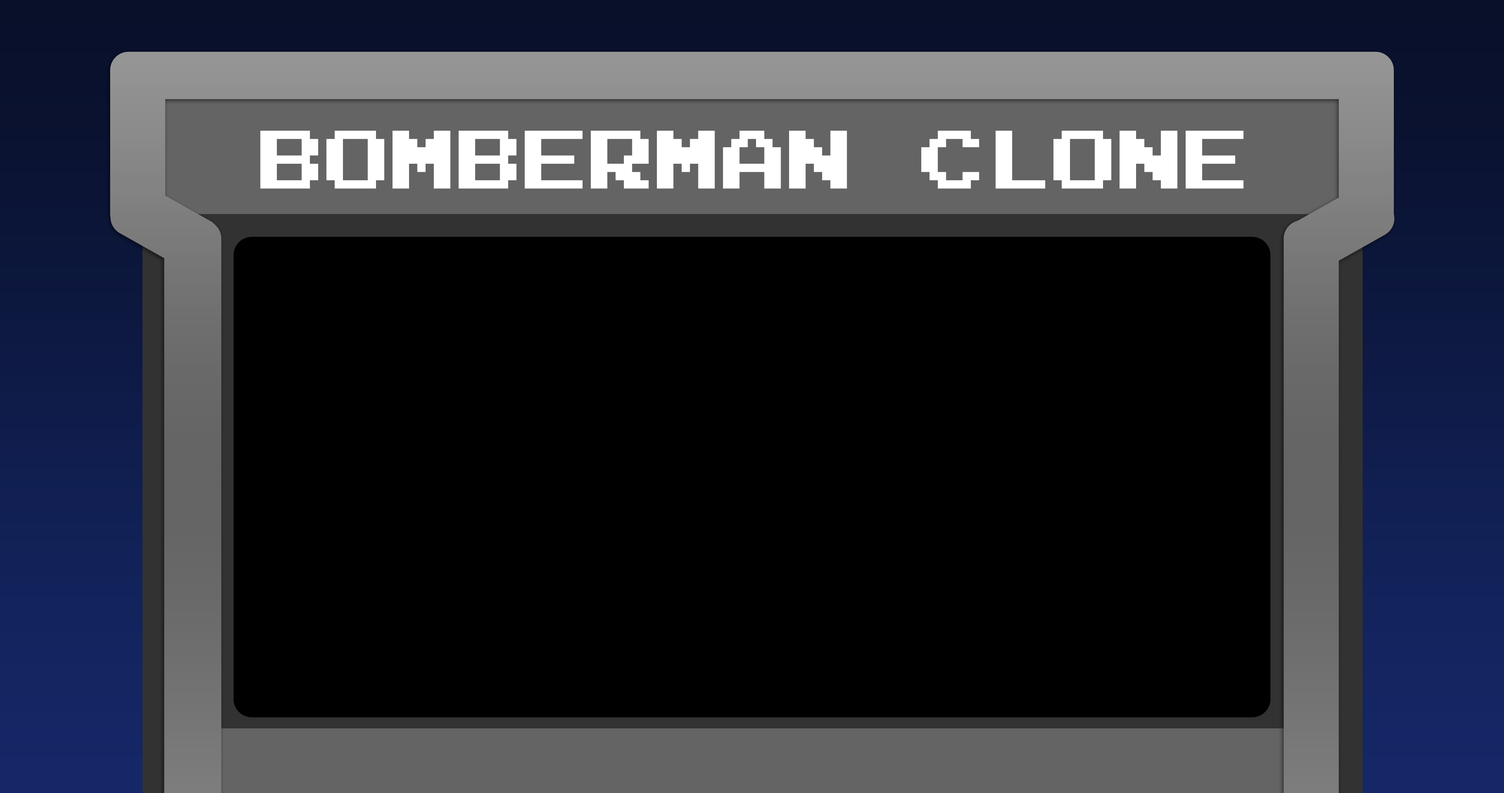
<style>
.page{position:relative;width:1504px;height:793px;background:#000000}
.page>*{position:absolute;margin:0}
.t1{font:66.1px "PressStart2P";color:#ffffff}
</style>
<div class="page">
<p class="t1" style="left:260px;top:131px;width:983px;height:58px">BOMBERMAN CLONE</p>
</div>
